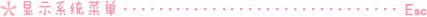
<style>
.page{position:relative;width:427px;height:17px;background:#ffffff}
.page>*{position:absolute;margin:0}
.t1{font:18px "¢è?";color:#ff93a5}
</style>
<div class="page">
<p class="t1" style="left:23px;top:0px;width:93px;height:16px">显示系统菜单</p>
</div>
